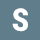
<style>
.page{position:relative;width:40px;height:40px;background:#607d8b}
.page>*{position:absolute;margin:0}
.t1{font:31px "RobotoCondensed-Bold";letter-spacing:0.03em;color:#ffffff;scale:1.04 1}
</style>
<div class="page">
<p class="t1" style="left:12px;top:8px;width:16px;height:24px">S</p>
</div>
